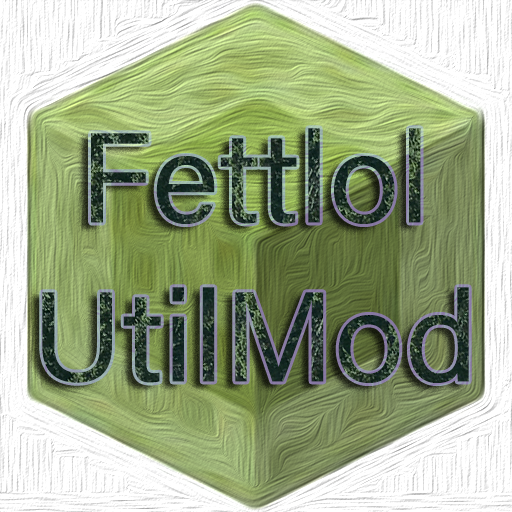
<style>
.page{position:relative;width:512px;height:512px}
.page>*{position:absolute;margin:0}
.t1{font:128px "AcuminConcept-Regular"}
</style>
<div class="page">
<p class="t1" style="left:91px;top:128px;width:330px;height:96px">Fettlol</p>
<p class="t1" style="left:42px;top:287px;width:427px;height:96px">UtilMod</p>
</div>
